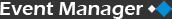
<style>
.page{position:relative;width:172px;height:19px;background:#333333}
.page>*{position:absolute;margin:0}
.t1{font:20px "ErasITC-Demi";color:#ffffff}
</style>
<div class="page">
<p class="t1" style="left:0px;top:2px;width:143px;height:17px">Event Manager</p>
</div>
